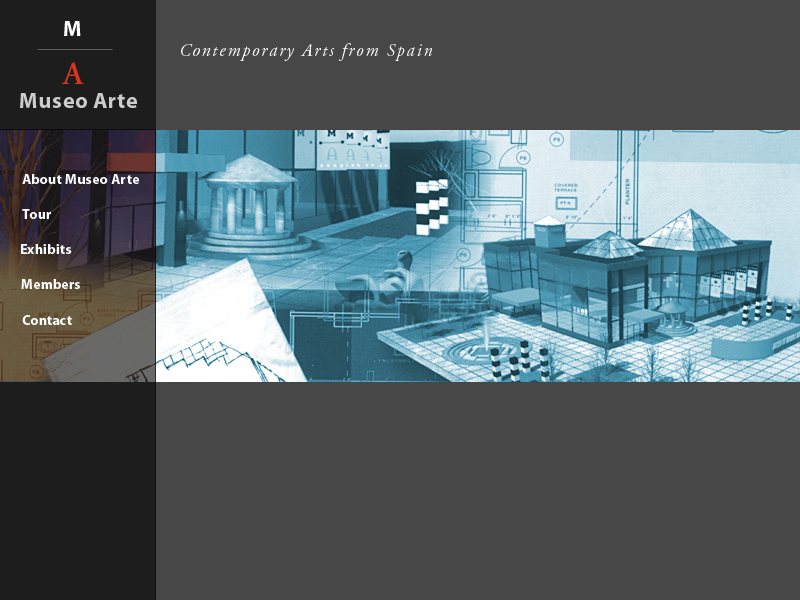
<style>
.page{position:relative;width:800px;height:600px;background:#474747}
.page>*{position:absolute;margin:0}
.t1{font:22px "Myriad-Bold";letter-spacing:0.025em;color:#cccccc}
.t2{font:14px "Myriad-Bold";letter-spacing:0.025em;color:#ffffff}
</style>
<div class="page">
<p class="t1" style="left:20px;top:93px;width:117px;height:15px">Museo Arte</p>
<p class="t2" style="left:22px;top:174px;width:117px;height:10px">About Museo Arte</p>
<p class="t2" style="left:22px;top:209px;width:29px;height:10px">Tour</p>
<p class="t2" style="left:21px;top:244px;width:51px;height:10px">Exhibits</p>
<p class="t2" style="left:21px;top:279px;width:59px;height:10px">Members</p>
<p class="t2" style="left:22px;top:315px;width:50px;height:10px">Contact</p>
</div>
